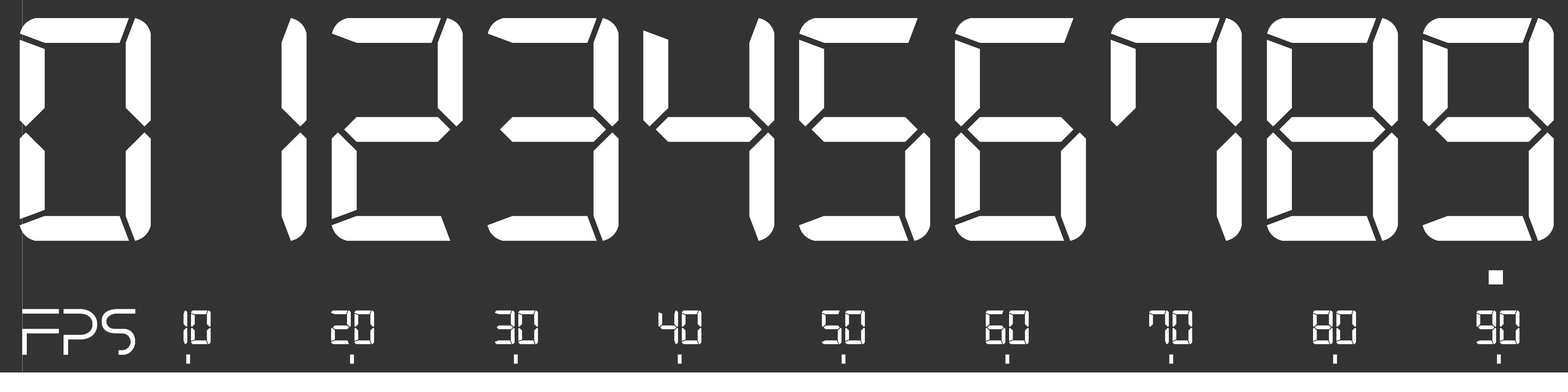
<style>
.page{position:relative;width:1568px;height:392px;background:#333333}
.page>*{position:absolute;margin:0}
.t1{font:340.3px "Digital-7Mono";color:#ffffff}
.t2{font:194.7px "Digital-7Mono";color:#ffffff}
.t3{font:61.2px "DissolveRegular";color:#ffffff}
.t4{font:51.4px "Digital-7Mono";color:#ffffff}
</style>
<div class="page">
<p class="t1" style="left:20px;top:18px;width:1534px;height:223px">0123456789</p>
<p class="t2" style="left:1488px;top:270px;width:15px;height:14px">.</p>
<p class="t3" style="left:22px;top:309px;width:114px;height:46px">FPS</p>
<p class="t4" style="left:183px;top:310px;width:1337px;height:35px">10     20     30     40     50     60     70     80     90</p>
</div>
